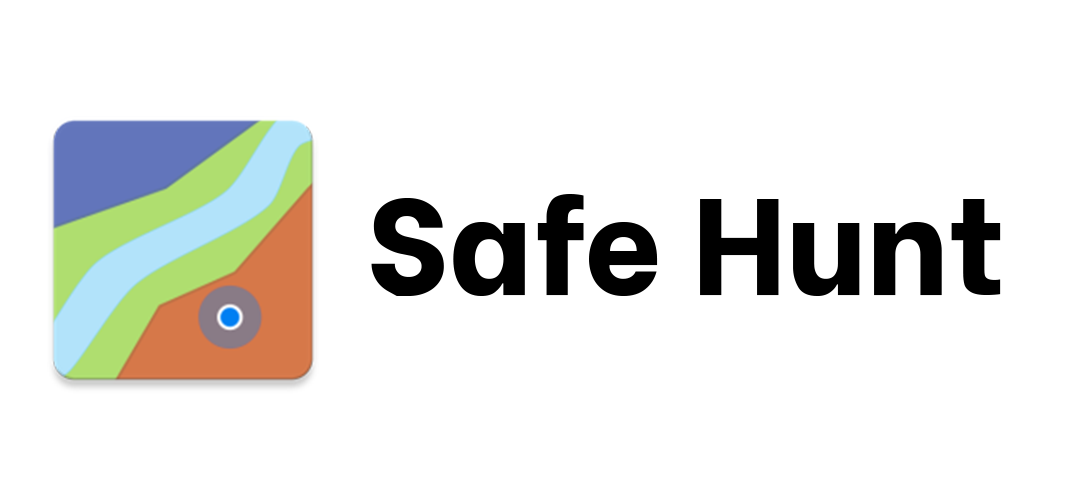
<style>
.page{position:relative;width:1080px;height:500px;background:#ffffff}
.page>*{position:absolute;margin:0}
.t1{font:136.4px "BeVietnam-ExtraBold";color:#000000}
</style>
<div class="page">
<p class="t1" style="left:371px;top:194px;width:630px;height:102px">Safe Hunt</p>
</div>
